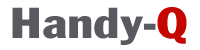
<style>
.page{position:relative;width:200px;height:50px;background:#ffffff}
.page>*{position:absolute;margin:0}
.t1{font:45.5px "FranklinCondGothic";color:#595a5f;scale:1.31 1}
.t2{font:45.5px "FranklinCondGothic";color:#c50500;scale:1.31 1}
</style>
<div class="page">
<p class="t1" style="left:12px;top:7px;width:175px;height:38px">Handy-<span class="t2">Q</span></p>
</div>
